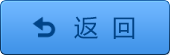
<style>
.page{position:relative;width:170px;height:55px}
.page>*{position:absolute;margin:0}
.t1{font:24px "MicrosoftYaHei";color:#004488}
</style>
<div class="page">
<p class="t1" style="left:74px;top:16px;width:61px;height:23px">返  回</p>
</div>
